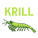
<style>
.page{position:relative;width:38px;height:38px;background:#ffffff}
.page>*{position:absolute;margin:0}
.t1{font:11.9px "AlwynNew-Bold";letter-spacing:-0.02em;color:#b9e34f}
</style>
<div class="page">
<p class="t1" style="left:5px;top:7px;width:29px;height:9px">KRILL</p>
</div>
